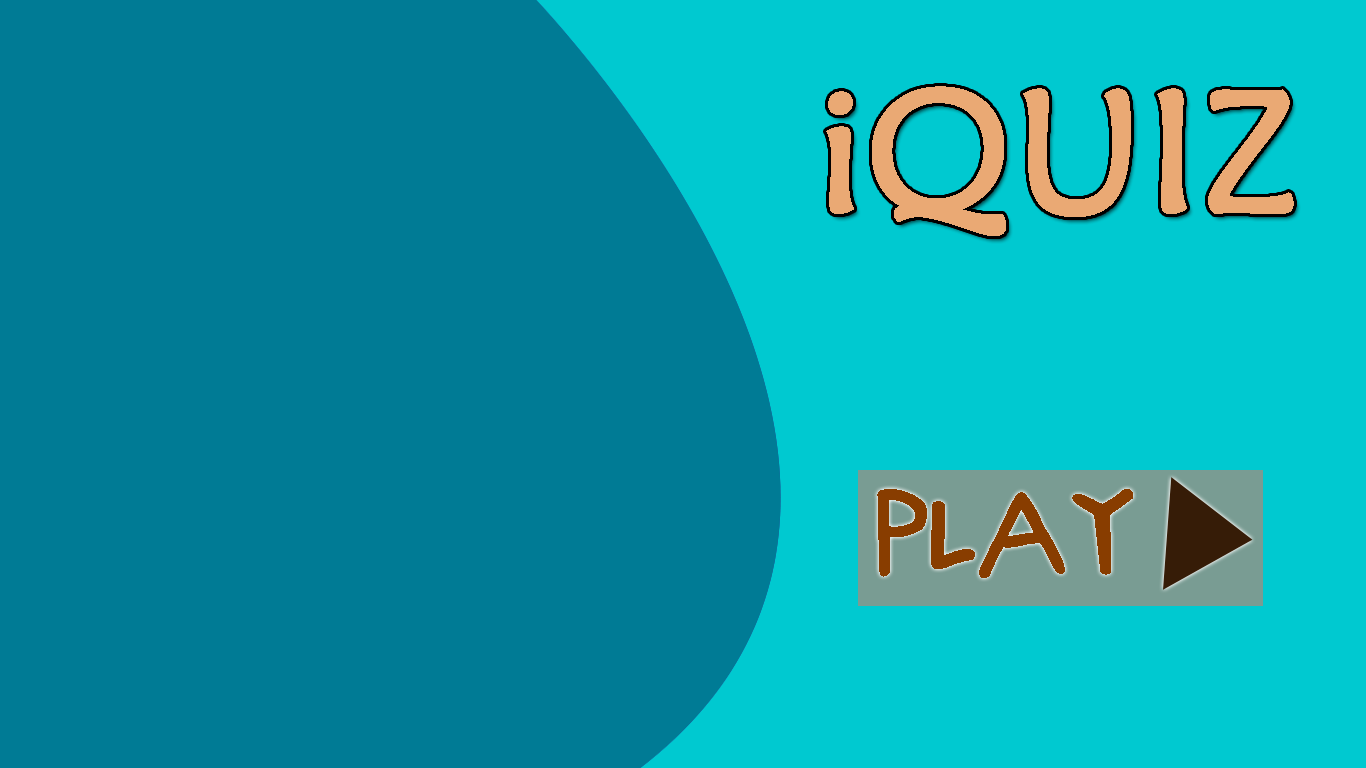
<style>
.page{position:relative;width:1366px;height:768px;background:#007b95}
.page>*{position:absolute;margin:0}
.t1{font:172.7px "MaiandraGD-Regular";color:#eaa974;font-weight:bold}
.t2{font:118.5px "SchoolboySam-Regular";color:#883d00;font-weight:bold}
</style>
<div class="page">
<p class="t1" style="left:826px;top:86px;width:468px;height:150px">iQUIZ</p>
<p class="t2" style="left:877px;top:489px;width:256px;height:89px">PLAY</p>
</div>
